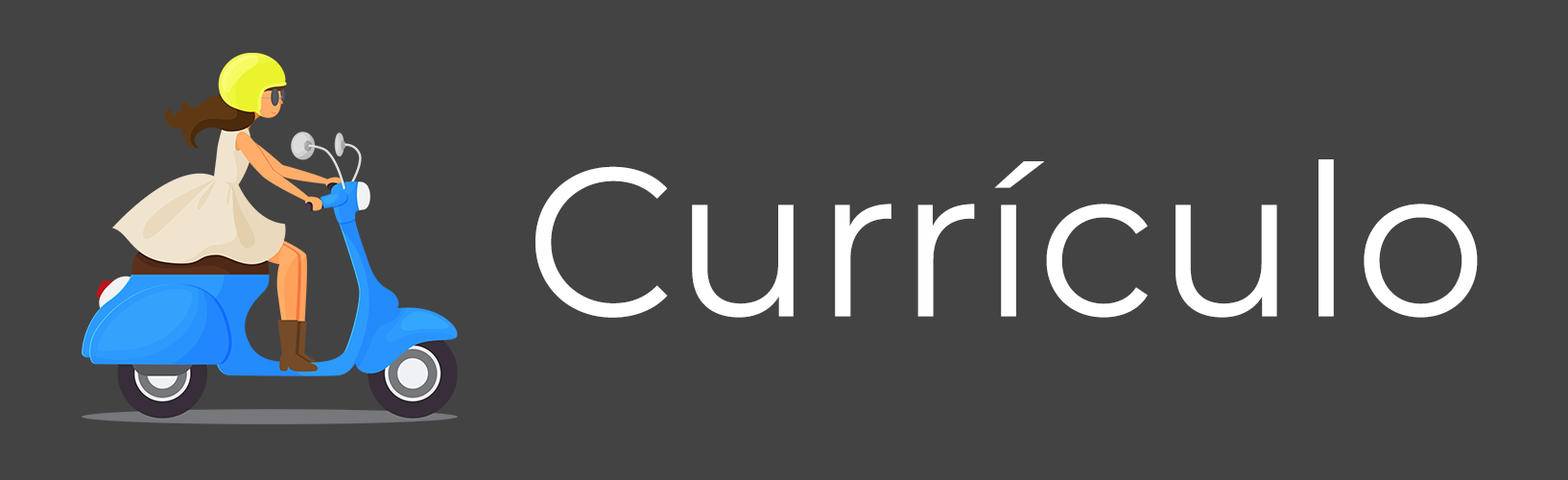
<style>
.page{position:relative;width:1568px;height:480px;background:#434343}
.page>*{position:absolute;margin:0}
.t1{font:211.1px "Montserrat-Regular";color:#ffffff}
</style>
<div class="page">
<p class="t1" style="left:535px;top:159px;width:943px;height:159px">Currículo</p>
</div>
